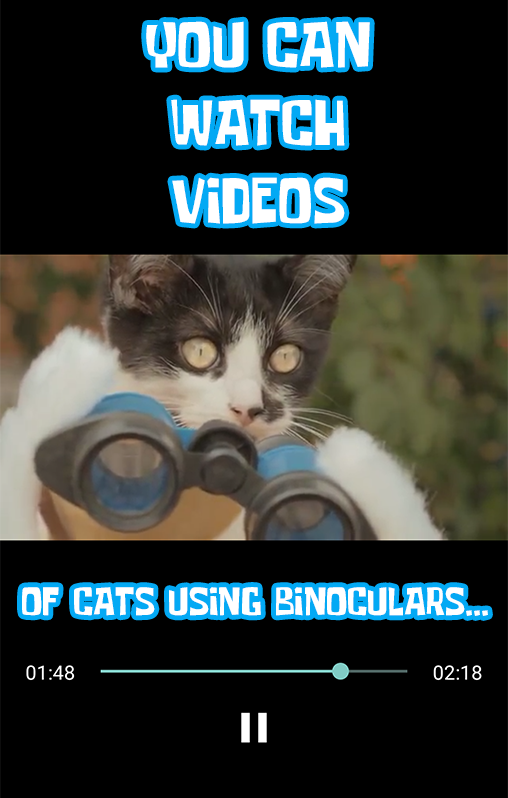
<style>
.page{position:relative;width:508px;height:798px;background:#000000}
.page>*{position:absolute;margin:0}
.t1{font:65px "SomeTimeLater";color:#ffffff}
.t2{font:40px "SomeTimeLater";color:#ffffff}
</style>
<div class="page">
<p class="t1" style="left:146px;top:21px;width:224px;height:203px;text-align:center">YOU CAN<br>WATCH<br>VIDEOS</p>
<p class="t2" style="left:22px;top:587px;width:466px;height:29px">OF CATS USING BINOCULARS...</p>
</div>
